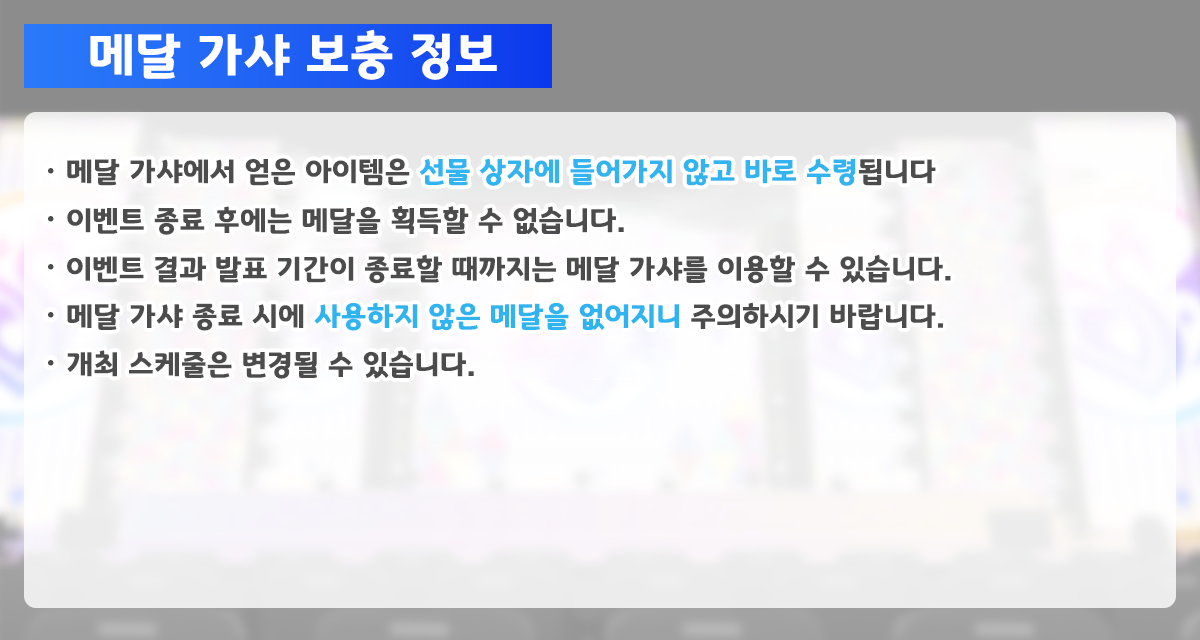
<style>
.page{position:relative;width:1200px;height:640px}
.page>*{position:absolute;margin:0}
.t1{font:50.7px "GyeonggiTitleB";letter-spacing:0.03em;color:#ffffff}
.t2{font:29.3px "GyeonggiTitleB";letter-spacing:0.03em;color:#32b4f0}
.t3{font:29.3px "GyeonggiTitleB";letter-spacing:0.03em;color:#4c4c4c}
.t4{font:29.3px "GyeonggiTitleB";letter-spacing:0.03em;color:#30b4f0}
</style>
<div class="page">
<p class="t1" style="left:90px;top:29px;width:407px;height:51px">메달 가샤 보충 정보</p>
<p class="t2" style="left:67px;top:158px;width:869px;height:28px"><span class="t3">메달 가샤에서 얻은 아이템은 </span>선물 상자에 들어가지 않고 바로 수령<span class="t3">됩니다</span></p>
<p class="t3" style="left:67px;top:206px;width:557px;height:29px">이벤트 종료 후에는 메달을 획득할 수 없습니다.</p>
<p class="t3" style="left:67px;top:254px;width:884px;height:30px">이벤트 결과 발표 기간이 종료할 때까지는 메달 가샤를 이용할 수 있습니다.</p>
<p class="t4" style="left:67px;top:302px;width:876px;height:29px"><span class="t3">메달 가샤 종료 시에 </span>사용하지 않은 메달을 없어지니<span class="t3"> 주의하시기 바랍니다.</span></p>
<p class="t3" style="left:67px;top:350px;width:407px;height:29px">개최 스케줄은 변경될 수 있습니다.</p>
</div>
